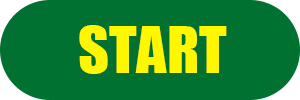
<style>
.page{position:relative;width:300px;height:100px;background:#007130}
.page>*{position:absolute;margin:0}
.t1{font:59.9px "Impact";color:#fff700}
</style>
<div class="page">
<p class="t1" style="left:79px;top:25px;width:148px;height:49px">START</p>
</div>
